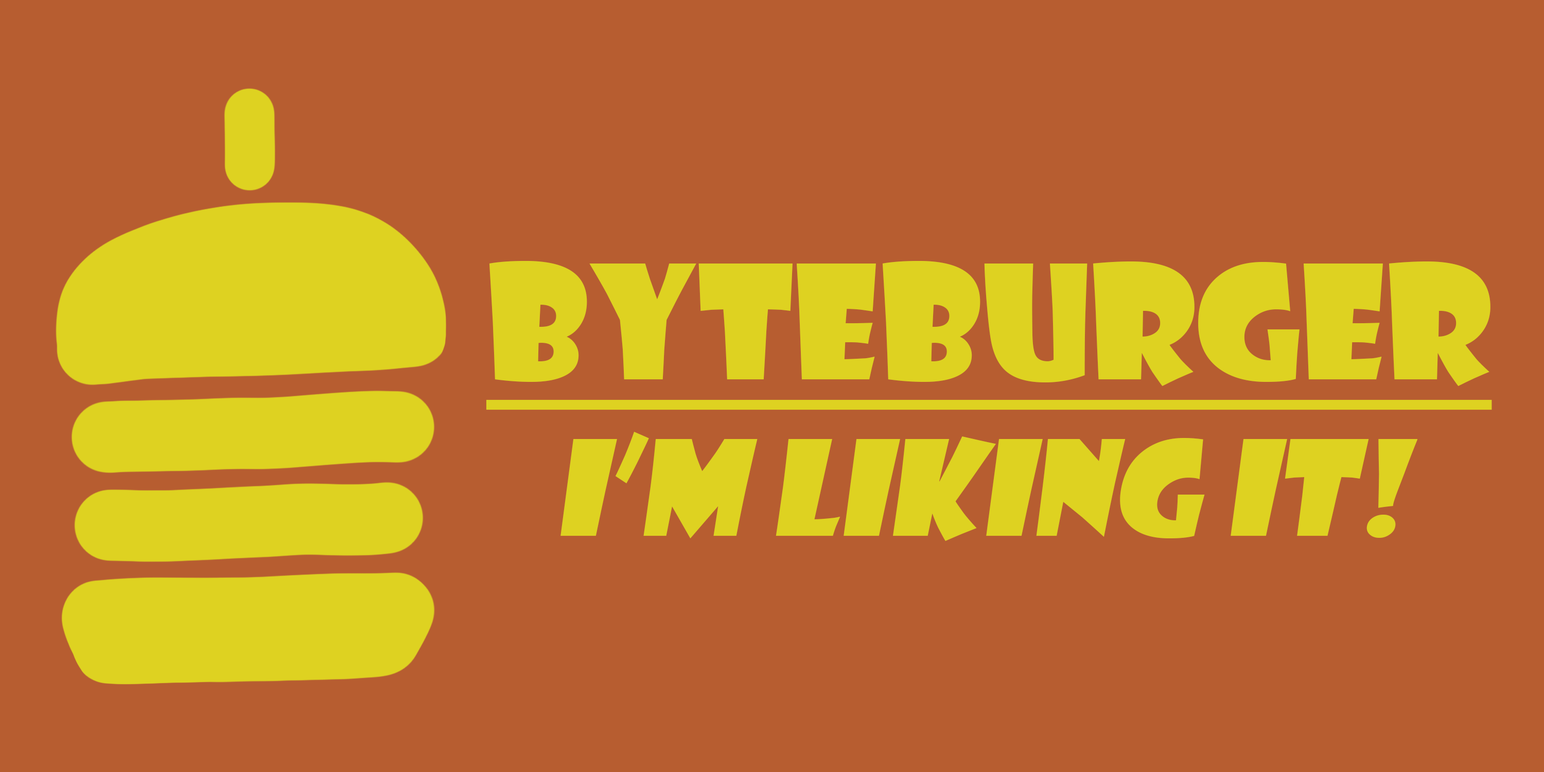
<style>
.page{position:relative;width:1544px;height:772px;background:#b75d30}
.page>*{position:absolute;margin:0}
.t1{font:154.4px "ShowcardGothic-Reg";color:#ded221;text-decoration:underline}
.t2{font:128.7px "ShowcardGothic-Reg";color:#ded221;font-style:italic}
</style>
<div class="page">
<p class="t1" style="left:486px;top:261px;width:1006px;height:149px">ByteBurger</p>
<p class="t2" style="left:561px;top:432px;width:857px;height:109px">I’m Liking it!</p>
</div>
